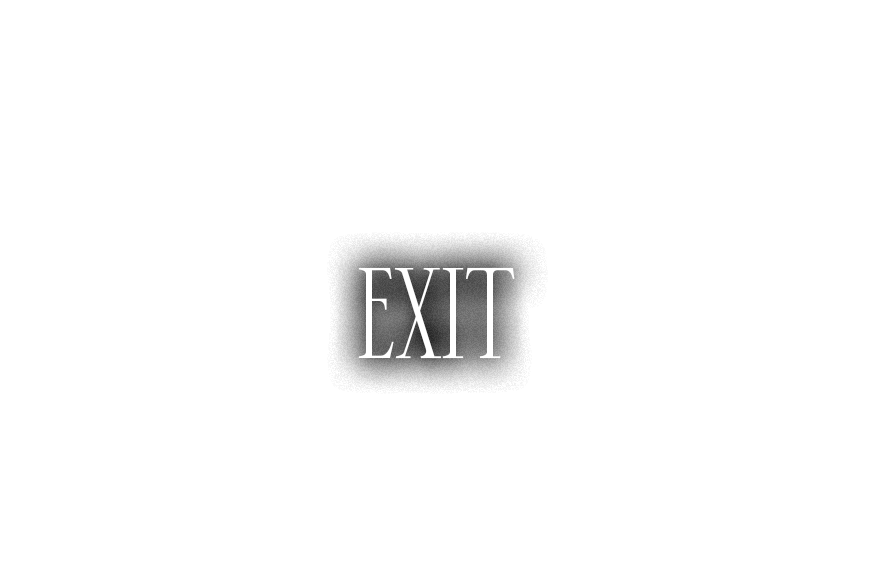
<style>
.page{position:relative;width:886px;height:580px;background:#ffffff}
.page>*{position:absolute;margin:0}
.t1{font:125px "Cyrano-DEMO";color:#ffffff}
</style>
<div class="page">
<p class="t1" style="left:358px;top:267px;width:157px;height:92px">exit</p>
</div>
